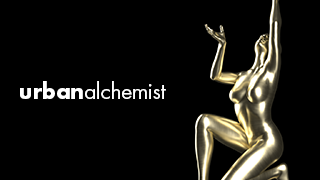
<style>
.page{position:relative;width:320px;height:180px;background:#000000}
.page>*{position:absolute;margin:0}
.t1{font:24px "FuturaPT-Book";letter-spacing:-0.02em;color:#ffffff}
.t2{font:24px "FuturaPT-Bold";letter-spacing:-0.02em;color:#ffffff}
</style>
<div class="page">
<p class="t1" style="left:20px;top:81px;width:146px;height:18px"><span class="t2">urban</span>alchemist</p>
</div>
